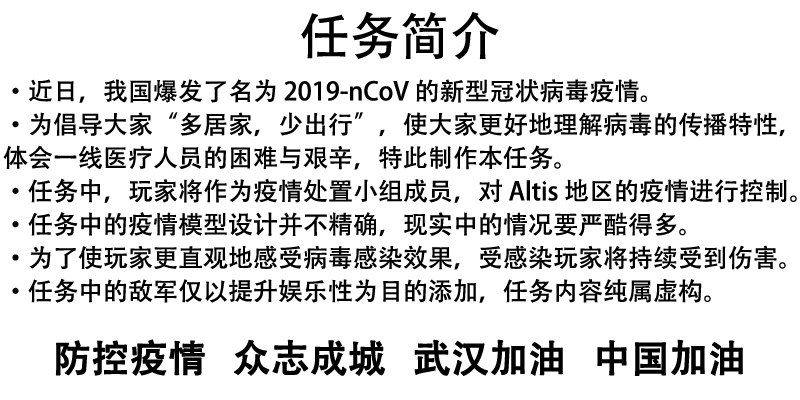
<style>
.page{position:relative;width:800px;height:400px;background:#ffffff}
.page>*{position:absolute;margin:0}
.t1{font:50px "AdobeHeitiStd-Regular";color:#000000}
.t2{font:25px/33.3px "AdobeHeitiStd-Regular";color:#000000}
.t3{font:37.5px "AdobeHeitiStd-Regular";color:#000000;font-weight:bold}
</style>
<div class="page">
<p class="t1" style="left:301px;top:11px;width:198px;height:49px">任务简介</p>
<p class="t2" style="left:3px;top:79px;width:794px;height:224px">·近日，我国爆发了名为 2019-nCoV 的新型冠状病毒疫情。<br>·为倡导大家“多居家，少出行”，使大家更好地理解病毒的传播特性，<br>体会一线医疗人员的困难与艰辛，特此制作本任务。<br>·任务中，玩家将作为疫情处置小组成员，对 Altis 地区的疫情进行控制。<br>·任务中的疫情模型设计并不精确，现实中的情况要严酷得多。<br>·为了使玩家更直观地感受病毒感染效果，受感染玩家将持续受到伤害。<br>·任务中的敌军仅以提升娱乐性为目的添加，任务内容纯属虚构。</p>
<p class="t3" style="left:55px;top:339px;width:688px;height:37px">防控疫情 众志成城 武汉加油 中国加油</p>
</div>
